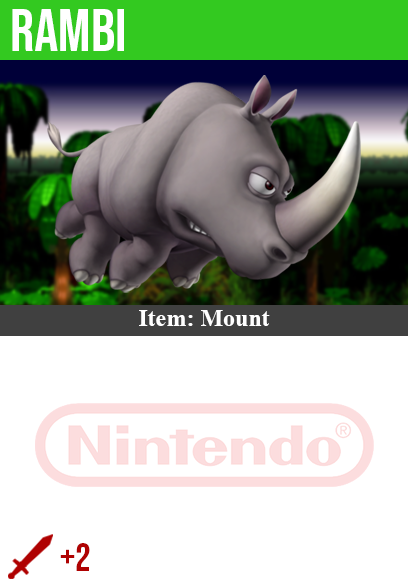
<style>
.page{position:relative;width:408px;height:585px;background:#ffffff}
.page>*{position:absolute;margin:0}
.t1{font:60px "BebasNeue-Regular";color:#ffffff}
.t2{font:24px "TimesNewRomanPS-BoldMT";color:#ffffff}
.t3{font:40px "BebasNeue-Regular";color:#af0202}
</style>
<div class="page">
<p class="t1" style="left:12px;top:9px;width:112px;height:42px">rambi</p>
<p class="t2" style="left:139px;top:310px;width:131px;height:16px">Item: Mount</p>
<p class="t3" style="left:60px;top:543px;width:30px;height:28px">+2</p>
</div>
